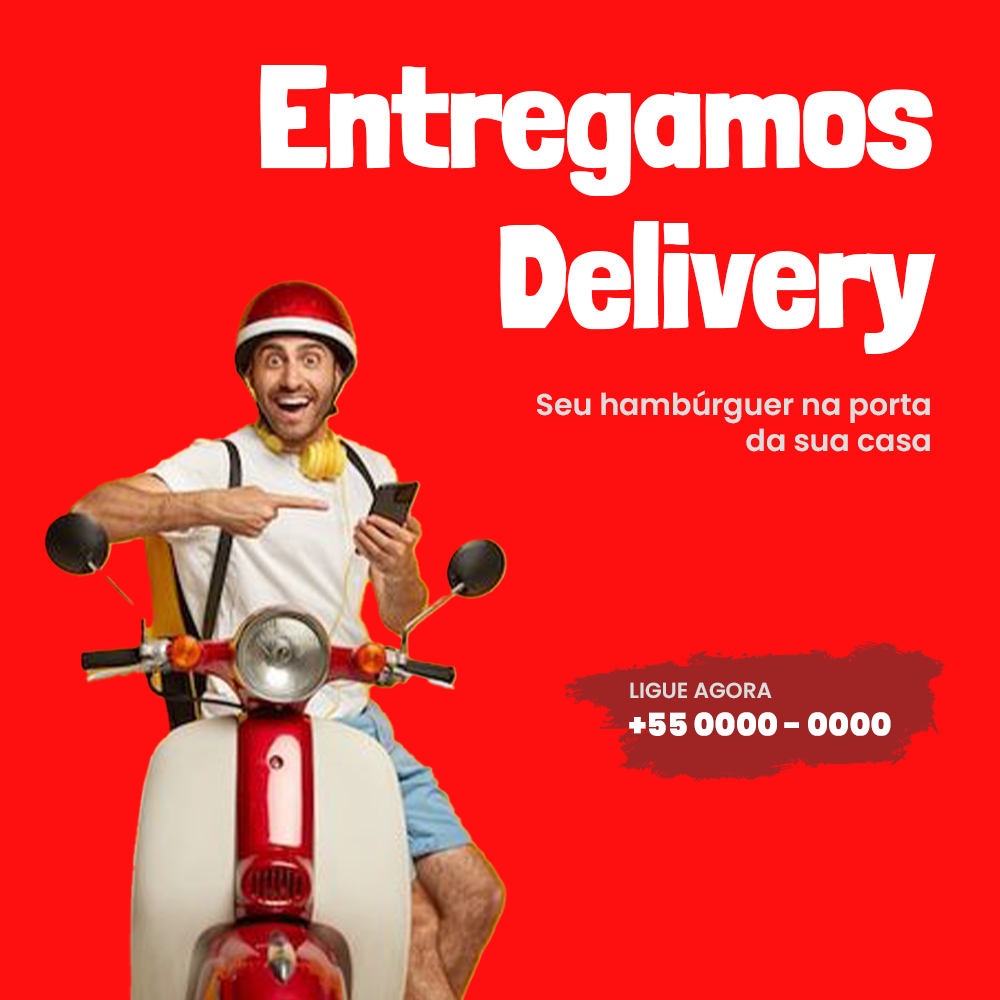
<style>
.page{position:relative;width:1000px;height:1000px;background:#ff1010}
.page>*{position:absolute;margin:0}
.t1{font:145px/160px "LondrinaSolid-Black";color:#ffffff}
.t2{font:30px "Poppins-SemiBold";color:#dddddd}
.t3{font:21.7px "Poppins-SemiBold";color:#dbdbdb}
.t4{font:31.8px "Poppins-Black";color:#ffffff}
</style>
<div class="page">
<p class="t1" style="left:260px;top:65px;width:676px;height:289px;text-align:right">Entregamos<br>Delivery</p>
<p class="t2" style="left:537px;top:390px;width:393px;height:62px;text-align:right">Seu hambúrguer na porta da sua casa</p>
<p class="t3" style="left:630px;top:682px;width:142px;height:17px">LIGUE AGORA</p>
<p class="t4" style="left:629px;top:712px;width:262px;height:24px">+55 0000 - 0000</p>
</div>
